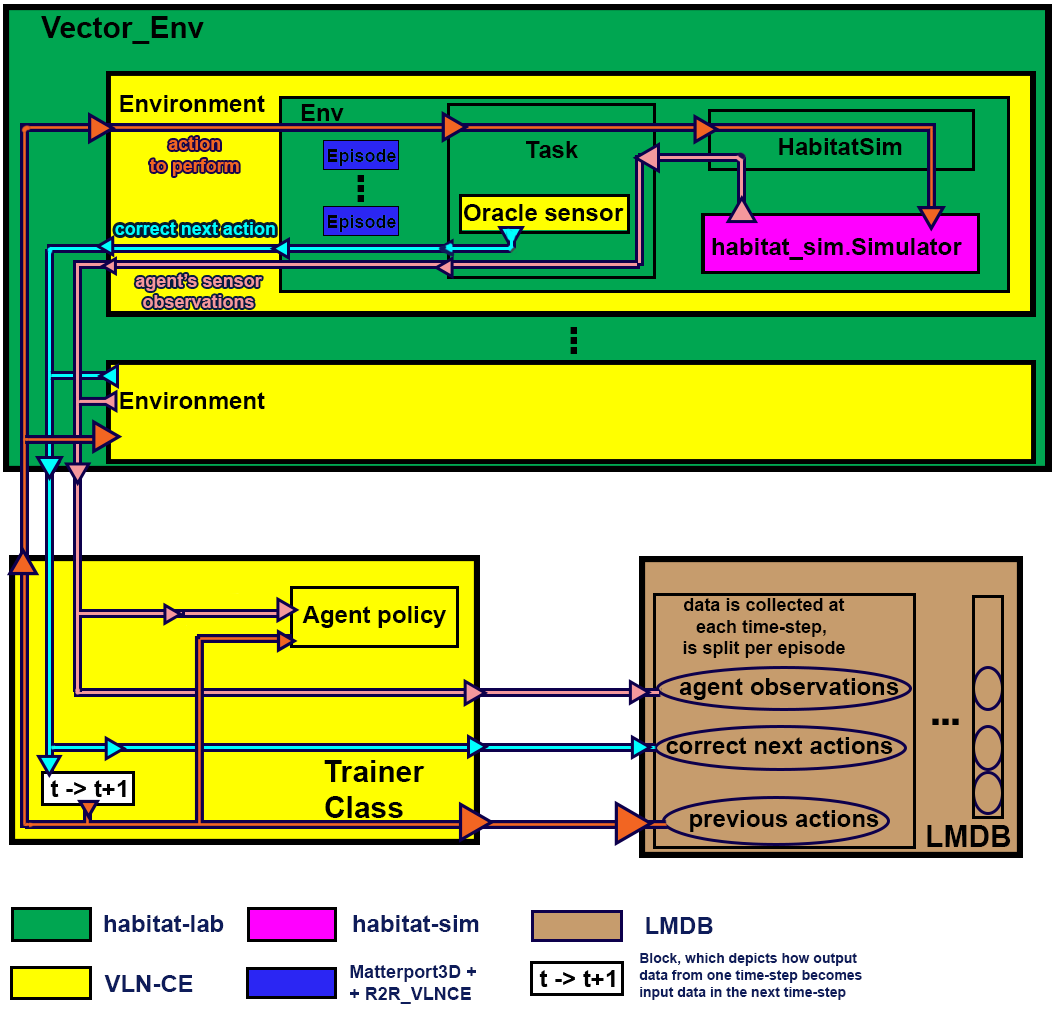
<style>
.page{position:relative;width:1056px;height:1010px;background:#ffffff}
.page>*{position:absolute;margin:0}
.t1{font:30px "Arial-BoldMT";color:#000000}
.t2{font:24px "Arial-BoldMT";color:#000000}
.t3{font:48px/10px "Arial-BoldMT";color:#000000}
.t4{font:18px "Arial-BoldMT";color:#00ffff}
.t5{font:18px "Arial-BoldMT";color:#f5989d}
.t6{font:18px "Arial-BoldMT";color:#010000}
.t7{font:24px "Arial-BoldMT";color:#0e1c5a}
.t8{font:14px "Arial-BoldMT";color:#0e1c5a}
.t9{font:18px "Arial-BoldMT";color:#0e1c5a}
</style>
<div class="page">
<p class="t1" style="left:41px;top:16px;width:163px;height:28px">Vector_Env</p>
<p class="t2" style="left:120px;top:95px;width:145px;height:17px">Environment</p>
<p class="t2" style="left:301px;top:104px;width:43px;height:17px">Env</p>
<p class="t2" style="left:526px;top:141px;width:52px;height:17px">Task</p>
<p class="t2" style="left:779px;top:138px;width:123px;height:17px">HabitatSim</p>
<p class="t3" style="left:357px;top:175px;width:7px;height:27px;text-align:right">.<br>.<br>.</p>
<p class="t2" style="left:464px;top:204px;width:160px;height:17px">Oracle sensor</p>
<p class="t4" style="left:115px;top:222px;width:160px;height:13px">correct next action</p>
<p class="t2" style="left:712px;top:238px;width:250px;height:22px">habitat_sim.Simulator</p>
<p class="t5" style="left:135px;top:274px;width:127px;height:34px;text-align:center">agent’s sensor<br>observations</p>
<p class="t3" style="left:570px;top:327px;width:7px;height:27px;text-align:right">.<br>.<br>.</p>
<p class="t2" style="left:120px;top:392px;width:145px;height:17px">Environment</p>
<p class="t2" style="left:302px;top:606px;width:144px;height:22px">Agent policy</p>
<p class="t6" style="left:683px;top:598px;width:162px;height:60px;text-align:center">data is collected at<br>each time-step, <br>is split per episode</p>
<p class="t2" style="left:679px;top:678px;width:220px;height:22px">agent observations</p>
<p class="t3" style="left:932px;top:718px;width:27px;height:7px;text-align:right;rotate:90deg">.<br>.<br>.</p>
<p class="t2" style="left:666px;top:737px;width:227px;height:17px">correct next actions</p>
<p class="t1" style="left:324px;top:760px;width:101px;height:58px;text-align:right">Trainer<br>Class</p>
<p class="t2" style="left:690px;top:810px;width:189px;height:22px">previous actions</p>
<p class="t1" style="left:927px;top:825px;width:84px;height:22px">LMDB</p>
<p class="t7" style="left:104px;top:915px;width:120px;height:17px">habitat-lab</p>
<p class="t7" style="left:353px;top:915px;width:126px;height:17px">habitat-sim</p>
<p class="t7" style="left:646px;top:917px;width:67px;height:17px">LMDB</p>
<p class="t8" style="left:639px;top:953px;width:223px;height:47px;text-align:right">Block, which depicts how output <br>data from one time-step becomes <br>input data in the next time-step</p>
<p class="t9" style="left:350px;top:965px;width:126px;height:39px;text-align:right">Matterport3D +<br>+ R2R_VLNCE</p>
<p class="t7" style="left:104px;top:975px;width:89px;height:17px">VLN-CE</p>
</div>
